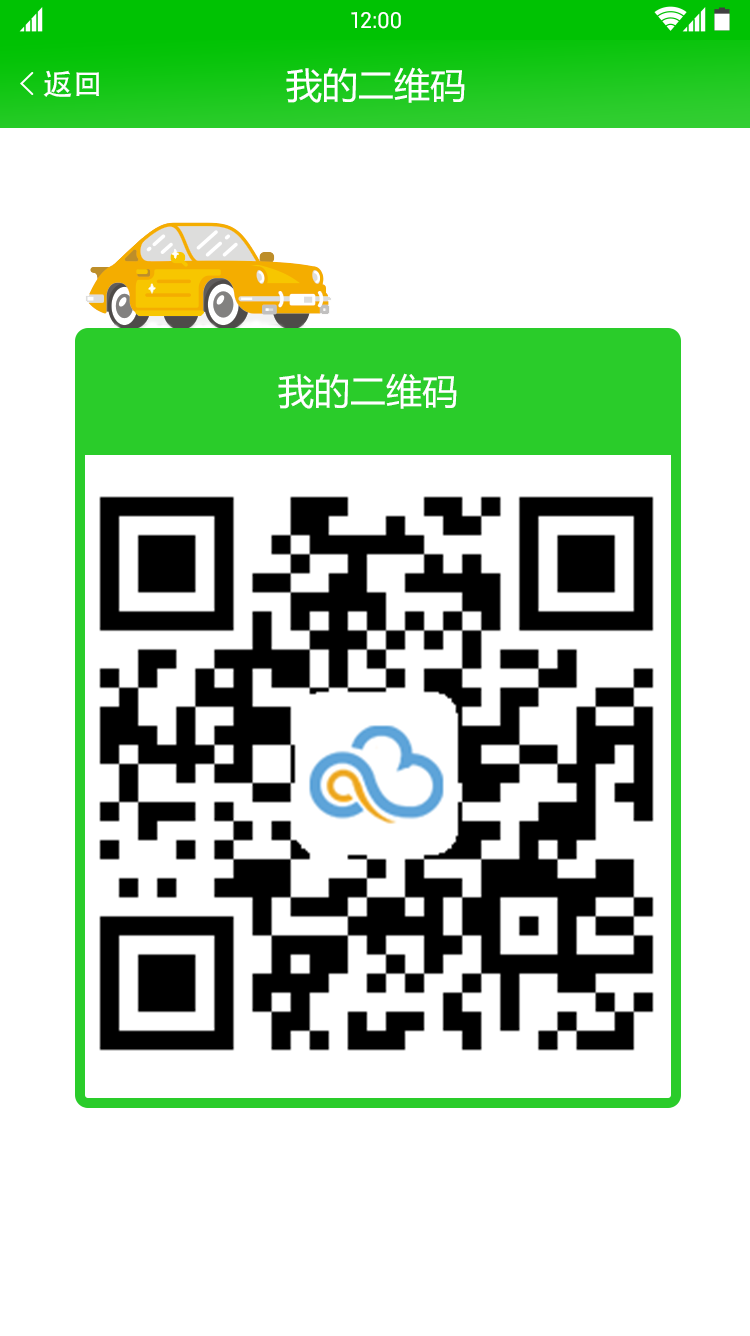
<style>
.page{position:relative;width:750px;height:1336px;background:#ffffff}
.page>*{position:absolute;margin:0}
.t1{font:22px "Roboto-Regular";color:#ffffff}
.t2{font:30px "AdobeHeitiStd-Regular";color:#ffffff}
.t3{font:36px "MicrosoftYaHei";color:#ffffff}
</style>
<div class="page">
<p class="t1" style="left:351px;top:12px;width:50px;height:17px">12:00</p>
<p class="t2" style="left:43px;top:70px;width:56px;height:27px">返回</p>
<p class="t3" style="left:286px;top:67px;width:179px;height:36px">我的二维码</p>
<p class="t3" style="left:278px;top:373px;width:179px;height:36px">我的二维码</p>
</div>
